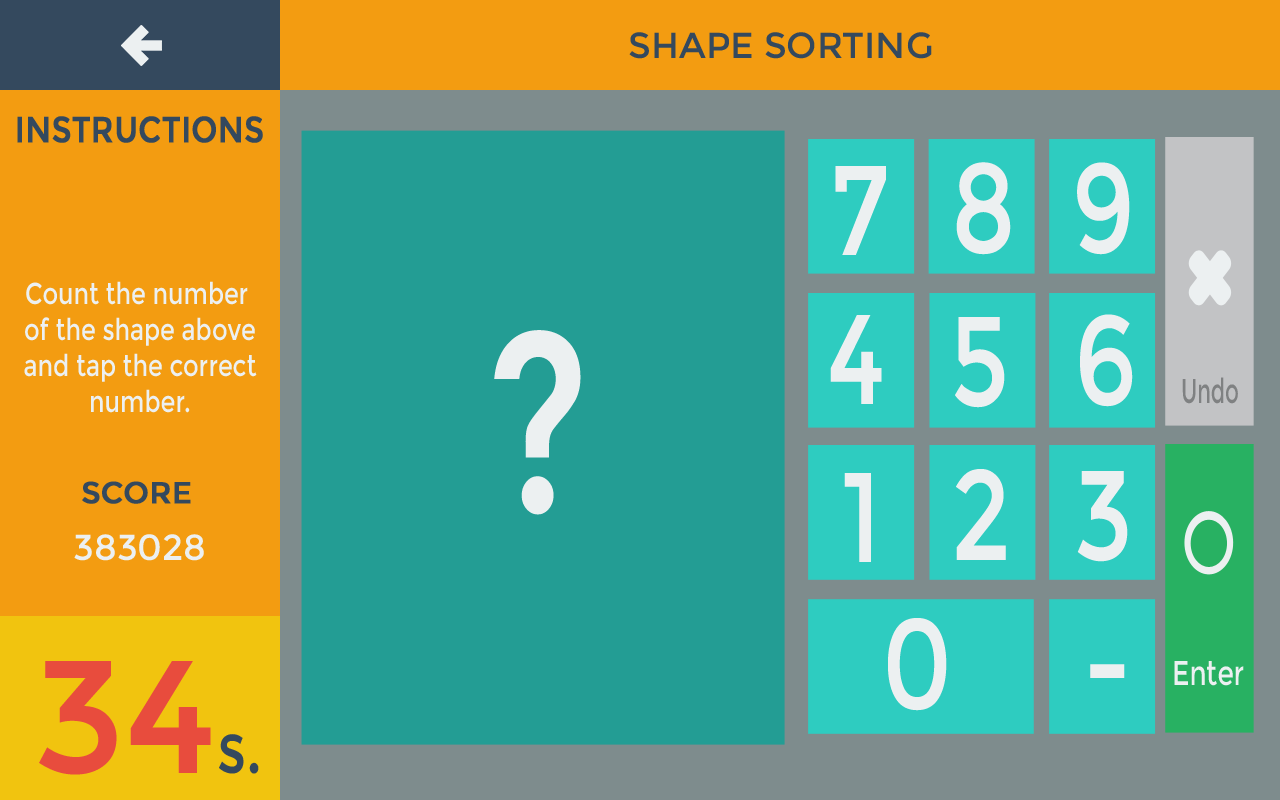
<style>
.page{position:relative;width:1280px;height:800px;background:#239d94}
.page>*{position:absolute;margin:0}
.t1{font:36px "Montserrat-Regular";color:#34495e}
.t2{font:36px "Montserrat-Regular";color:#34495e;text-transform:uppercase;font-weight:bold;scale:0.85 1}
.t3{font:127.4px "Montserrat-Regular";color:#ecf0f1;scale:0.8 1}
.t4{font:30px "Montserrat-Regular";color:#ecf0f1;scale:0.8 1}
.t5{font:256px "Montserrat-Regular";color:#ecf0f1;scale:0.8 1}
.t6{font:34.4px "Montserrat-Regular";color:#7f8182;scale:0.62 1}
.t7{font:30px "Montserrat-Regular";color:#34495e;font-weight:bold}
.t8{font:36px "Montserrat-Regular";color:#ecf0f1}
.t9{font:160px "Montserrat-Regular";color:#e84c3d}
.t10{font:34.4px "Montserrat-Regular";color:#ecf0f1;scale:0.77 1}
.t11{font:72px "Montserrat-Regular";color:#34495e;scale:0.8 1}
</style>
<div class="page">
<p class="t1" style="left:629px;top:32px;width:303px;height:27px">SHAPE SORTING</p>
<p class="t2" style="left:17px;top:116px;width:246px;height:27px">Instructions</p>
<p class="t3" style="left:835px;top:166px;width:51px;height:89px">7</p>
<p class="t3" style="left:956px;top:162px;width:55px;height:93px">8</p>
<p class="t3" style="left:1077px;top:162px;width:53px;height:93px">9</p>
<p class="t4" style="left:24px;top:281px;width:233px;height:132px;text-align:center">Count the number <br>of the shape above<br>and tap the correct<br>number.</p>
<p class="t3" style="left:830px;top:315px;width:52px;height:89px">4</p>
<p class="t3" style="left:955px;top:317px;width:50px;height:91px">5</p>
<p class="t3" style="left:1080px;top:314px;width:53px;height:93px">6</p>
<p class="t5" style="left:494px;top:330px;width:87px;height:185px">?</p>
<p class="t6" style="left:1182px;top:377px;width:56px;height:27px">Undo</p>
<p class="t3" style="left:844px;top:473px;width:27px;height:89px">1</p>
<p class="t3" style="left:956px;top:469px;width:50px;height:91px">2</p>
<p class="t3" style="left:1077px;top:471px;width:51px;height:91px">3</p>
<p class="t7" style="left:82px;top:481px;width:109px;height:23px">SCORE</p>
<p class="t8" style="left:74px;top:534px;width:130px;height:27px">383028</p>
<p class="t3" style="left:888px;top:618px;width:59px;height:93px">0</p>
<p class="t9" style="left:39px;top:661px;width:172px;height:114px">34</p>
<p class="t3" style="left:1090px;top:664px;width:35px;height:14px">-</p>
<p class="t10" style="left:1174px;top:661px;width:70px;height:25px">Enter</p>
<p class="t11" style="left:219px;top:734px;width:40px;height:40px">s.</p>
</div>
